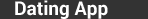
<style>
.page{position:relative;width:148px;height:19px;background:#333333}
.page>*{position:absolute;margin:0}
.t1{font:19px "Roboto-Bold";color:#ffffff}
</style>
<div class="page">
<p class="t1" style="left:15px;top:0px;width:93px;height:19px">Dating App</p>
</div>
